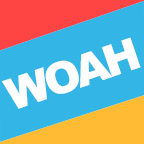
<style>
.page{position:relative;width:144px;height:144px;background:#33b5e5}
.page>*{position:absolute;margin:0}
.t1{font:43.8px "Arial-Black";letter-spacing:-0.075em;color:#ffffff}
</style>
<div class="page">
<p class="t1" style="left:2px;top:37px;width:139px;height:72px;rotate:-19deg">WOAH</p>
</div>
